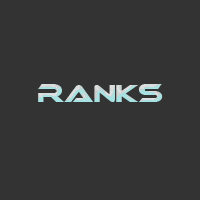
<style>
.page{position:relative;width:200px;height:200px;background:#333333}
.page>*{position:absolute;margin:0}
.t1{font:24px "Ethnocentric"}
</style>
<div class="page">
<p class="t1" style="left:38px;top:84px;width:125px;height:18px">Ranks</p>
</div>
